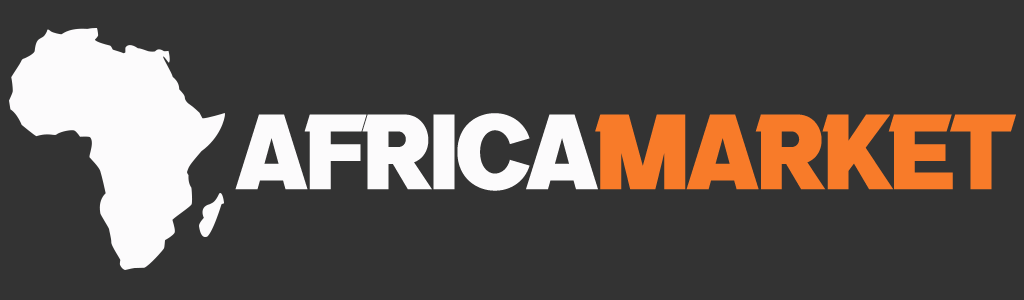
<style>
.page{position:relative;width:1024px;height:300px;background:#333333}
.page>*{position:absolute;margin:0}
.t1{font:101.5px "aBlackLives";letter-spacing:-0.025em;color:#fcfbfc}
.t2{font:101.5px "aBlackLives";letter-spacing:-0.025em;color:#f87b29}
</style>
<div class="page">
<p class="t1" style="left:235px;top:113px;width:781px;height:78px">AFRICA<span class="t2">MARKET</span></p>
</div>
